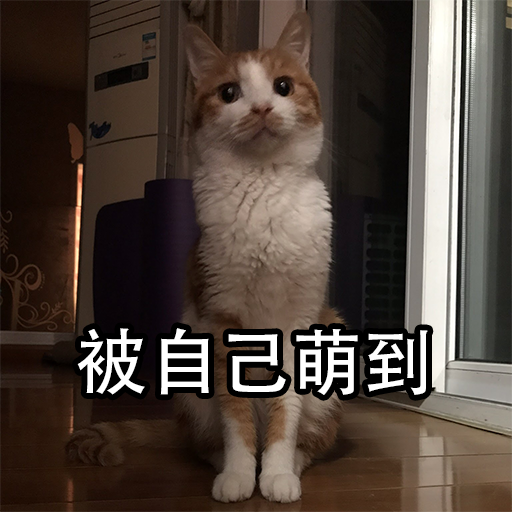
<style>
.page{position:relative;width:512px;height:512px}
.page>*{position:absolute;margin:0}
.t1{font:72px "AdobeHeitiStd-Regular";color:#ffffff}
</style>
<div class="page">
<p class="t1" style="left:77px;top:328px;width:351px;height:67px">被自己萌到</p>
</div>
